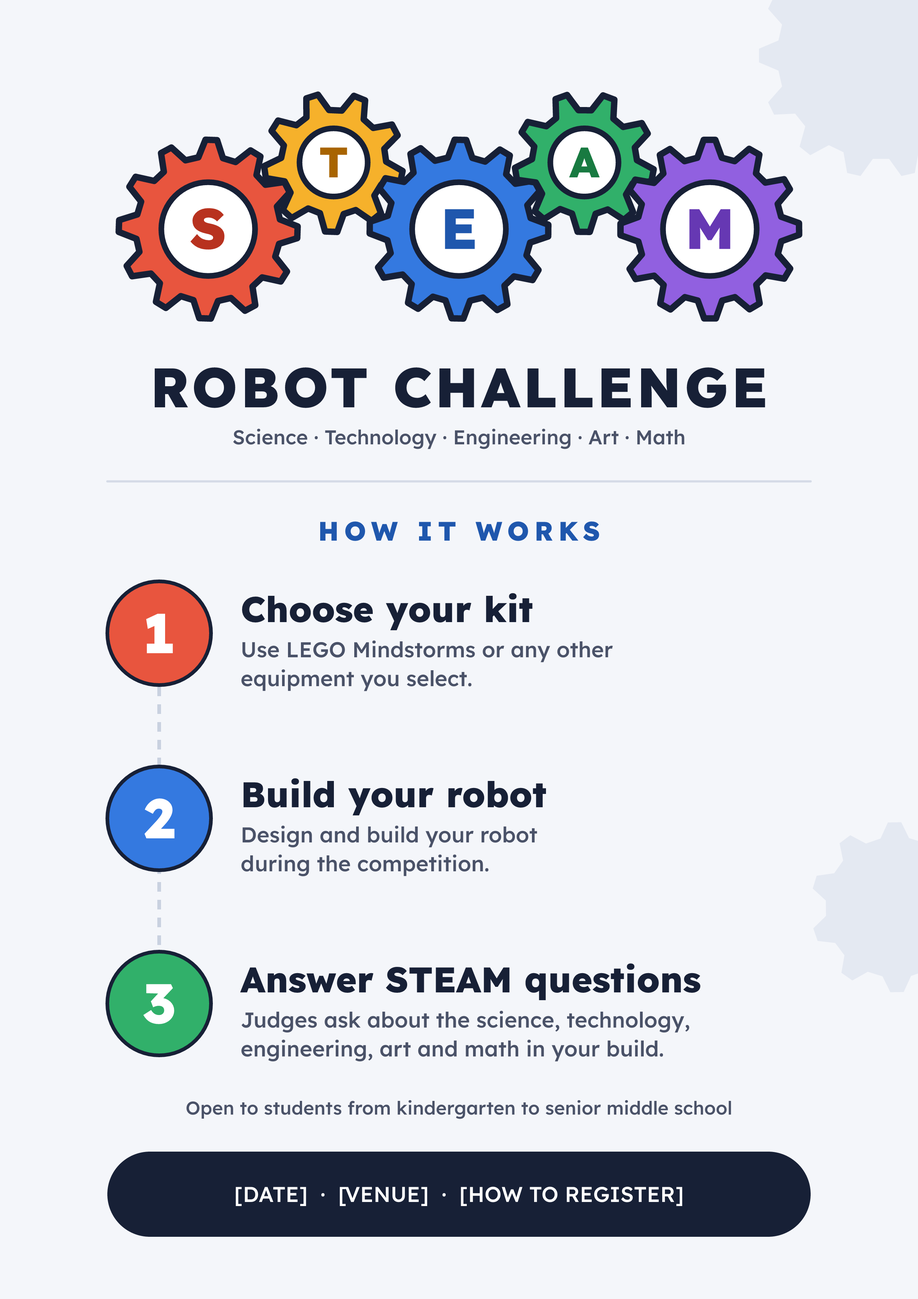
<style>
.page{position:relative;width:918px;height:1299px;background:#f4f6fa}
.page>*{position:absolute;margin:0}
.t1{font:55.5px "Lexend-ExtraBold";letter-spacing:0.053em;color:#172036}
.t2{font:20px "Lexend-Medium";color:#4a5268}
.t3{font:26.7px "Lexend-ExtraBold";letter-spacing:0.194em;color:#1f57ad}
.t4{font:35.5px "Lexend-ExtraBold";color:#172036}
.t5{font:55.5px "Lexend-ExtraBold";color:#ffffff}
.t6{font:21.5px/28.9px "Lexend-Medium";color:#4a5268}
.t7{font:18.5px "Lexend-Medium";color:#4a5268}
.t8{font:21.5px "Lexend-Medium";color:#ffffff}
</style>
<div class="page">
<p class="t1" style="left:155px;top:367px;width:610px;height:41px">ROBOT CHALLENGE</p>
<p class="t2" style="left:233px;top:428px;width:452px;height:21px">Science · Technology · Engineering · Art · Math</p>
<p class="t3" style="left:320px;top:521px;width:279px;height:20px">HOW IT WORKS</p>
<p class="t4" style="left:242px;top:593px;width:291px;height:37px">Choose your kit</p>
<p class="t5" style="left:146px;top:613px;width:27px;height:40px">1</p>
<p class="t6" style="left:241px;top:640px;width:372px;height:51px">Use LEGO Mindstorms or any other<br>equipment you select.</p>
<p class="t4" style="left:244px;top:778px;width:302px;height:37px">Build your robot</p>
<p class="t5" style="left:144px;top:798px;width:31px;height:40px">2</p>
<p class="t6" style="left:241px;top:825px;width:296px;height:51px">Design and build your robot<br>during the competition.</p>
<p class="t4" style="left:240px;top:963px;width:460px;height:37px">Answer STEAM questions</p>
<p class="t5" style="left:143px;top:984px;width:31px;height:40px">3</p>
<p class="t6" style="left:241px;top:1010px;width:448px;height:51px">Judges ask about the science, technology,<br>engineering, art and math in your build.</p>
<p class="t7" style="left:186px;top:1100px;width:545px;height:19px">Open to students from kindergarten to senior middle school</p>
<p class="t8" style="left:236px;top:1186px;width:446px;height:20px">[DATE]  ·  [VENUE]  ·  [HOW TO REGISTER]</p>
</div>
